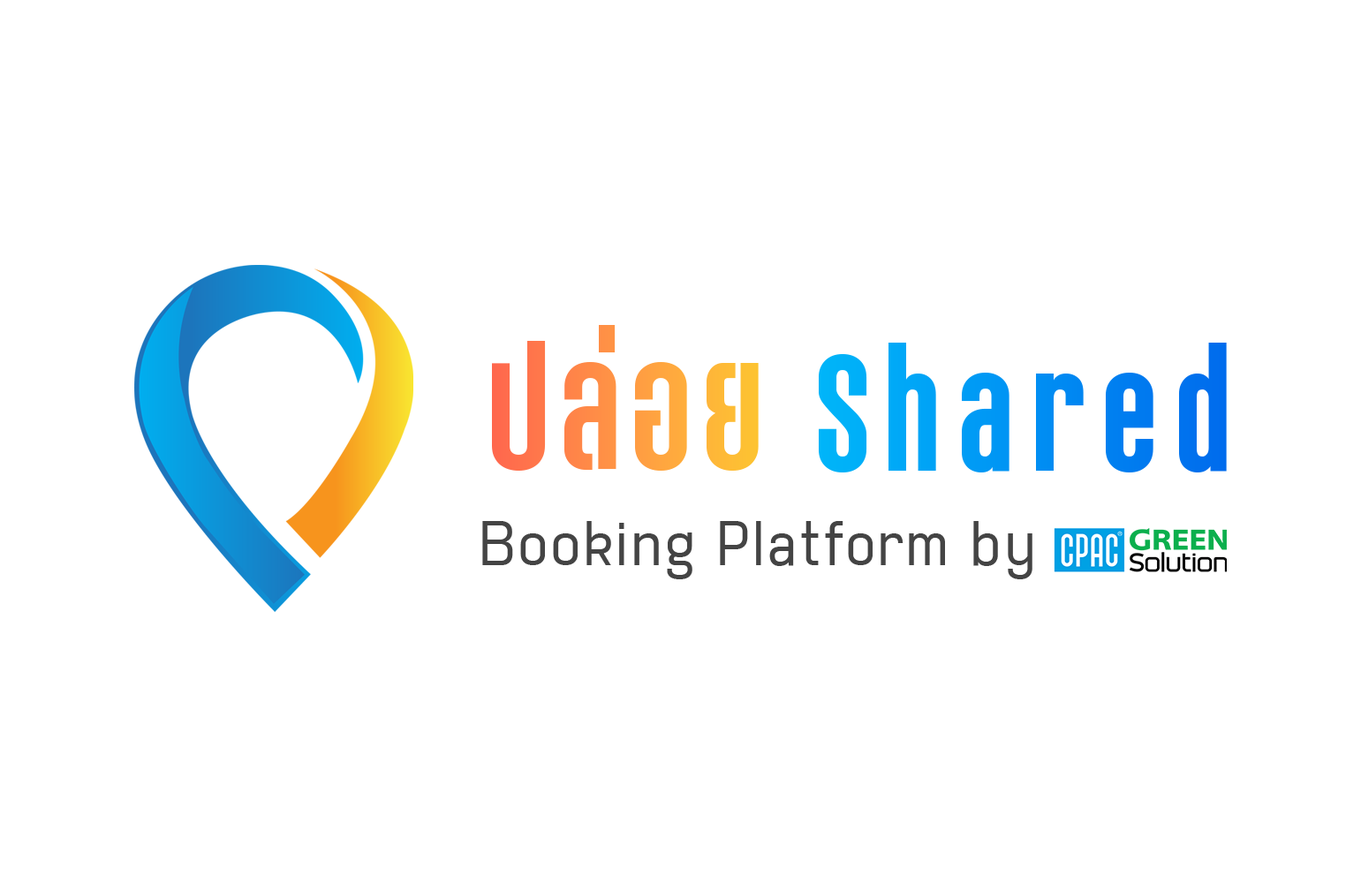
<style>
.page{position:relative;width:1361px;height:876px;background:#ffffff}
.page>*{position:absolute;margin:0}
.t1{font:176.6px "CPAC-CondensedBold"}
.t2{font:176.6px "CPAC-CondensedBold";color:#0c9ee9}
.t3{font:63.6px "CPACModern-Medium";color:#444444}
</style>
<div class="page">
<p class="t1" style="left:492px;top:325px;width:267px;height:146px">ปล่อย</p>
<p class="t2" style="left:819px;top:343px;width:408px;height:130px">Shared</p>
<p class="t3" style="left:482px;top:521px;width:550px;height:58px">Booking Platform by</p>
</div>
